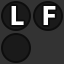
<style>
.page{position:relative;width:64px;height:64px;background:#333333}
.page>*{position:absolute;margin:0}
.t1{font:28.4px "MyriadPro-Bold";color:#ffffff}
</style>
<div class="page">
<p class="t1" style="left:11px;top:6px;width:13px;height:19px">L</p>
<p class="t1" style="left:43px;top:6px;width:13px;height:19px">F</p>
</div>
